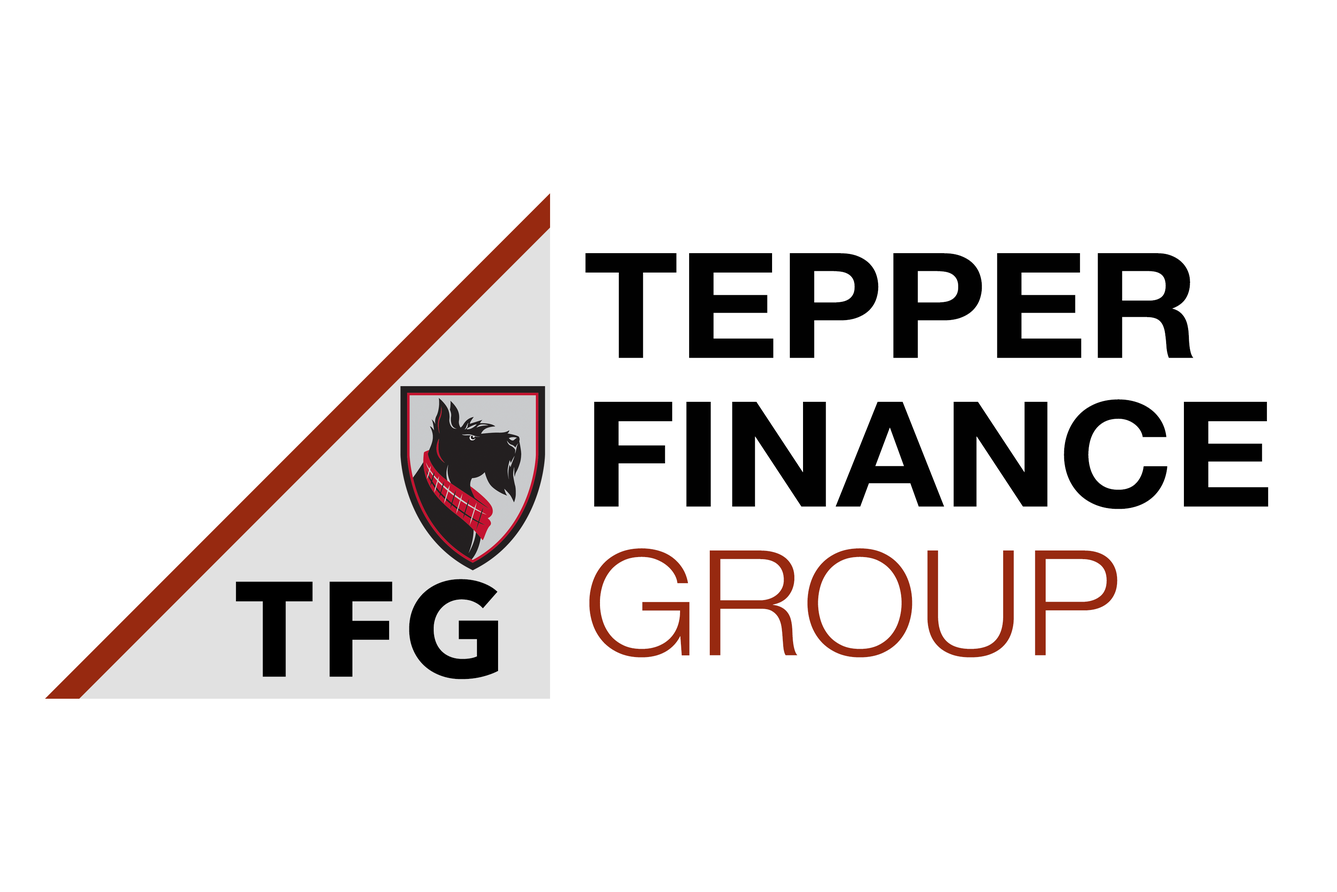
<style>
.page{position:relative;width:1337px;height:892px;background:#ffffff}
.page>*{position:absolute;margin:0}
.t1{font:146.5px/148.6px "HelveticaNeue-Bold";color:#010101;scale:1.06 1}
.t2{font:146.5px/148.6px "HelveticaNeue-Light";color:#972910;scale:1.06 1}
.t3{font:134.2px "AvenirNext-Bold";letter-spacing:0.05em;color:#000000}
</style>
<div class="page">
<p class="t1" style="left:585px;top:253px;width:684px;height:404px">TEPPER<br>FINANCE<br><span class="t2">GROUP</span></p>
<p class="t3" style="left:236px;top:579px;width:262px;height:100px">TFG</p>
</div>
